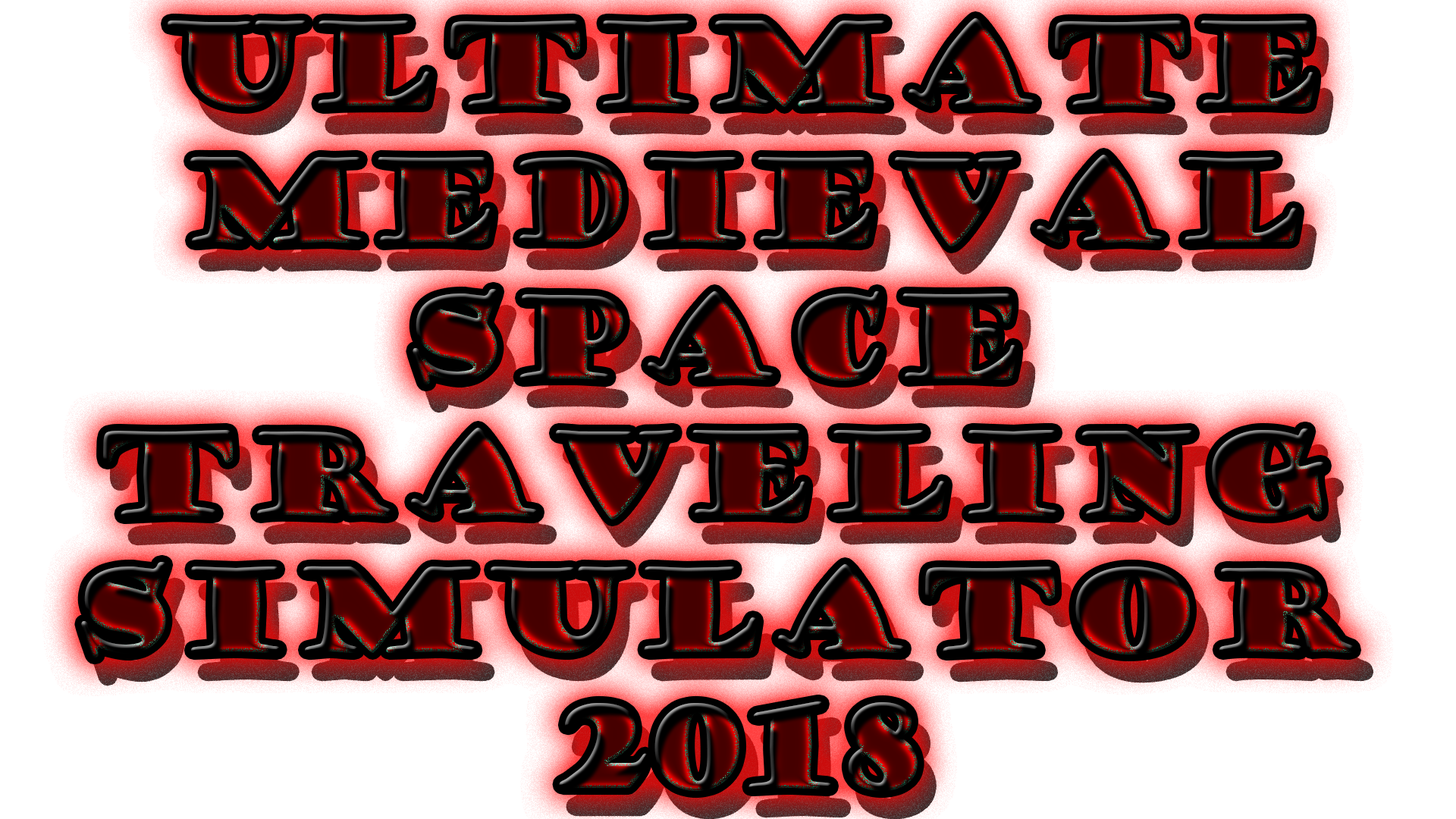
<style>
.page{position:relative;width:1456px;height:819px;background:#ffffff}
.page>*{position:absolute;margin:0}
.t1{font:113.7px "GoudyStout"}
</style>
<div class="page">
<p class="t1" style="left:81px;top:18px;width:1273px;height:773px;text-align:center">Ultimate<br> medieval <br>space <br>traveling <br>simulator <br>2018</p>
</div>
